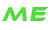
<style>
.page{position:relative;width:50px;height:30px;background:#ffffff}
.page>*{position:absolute;margin:0}
.t1{font:20px "EthnocentricRg-Italic";color:#53da3e}
</style>
<div class="page">
<p class="t1" style="left:2px;top:7px;width:25px;height:14px">M</p>
<p class="t1" style="left:30px;top:7px;width:19px;height:14px">E</p>
</div>
